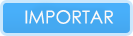
<style>
.page{position:relative;width:133px;height:36px;background:#45a9f1}
.page>*{position:absolute;margin:0}
.t1{font:18px "CenturyGothic";color:#faf8f8}
</style>
<div class="page">
<p class="t1" style="left:25px;top:10px;width:89px;height:14px">IMPORTAR</p>
</div>
